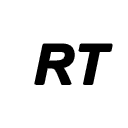
<style>
.page{position:relative;width:128px;height:128px;background:#ffffff}
.page>*{position:absolute;margin:0}
.t1{font:55.2px "Arial-BoldItalicMT";letter-spacing:0.02em;color:#000000}
</style>
<div class="page">
<p class="t1" style="left:35px;top:44px;width:77px;height:40px">RT</p>
</div>
